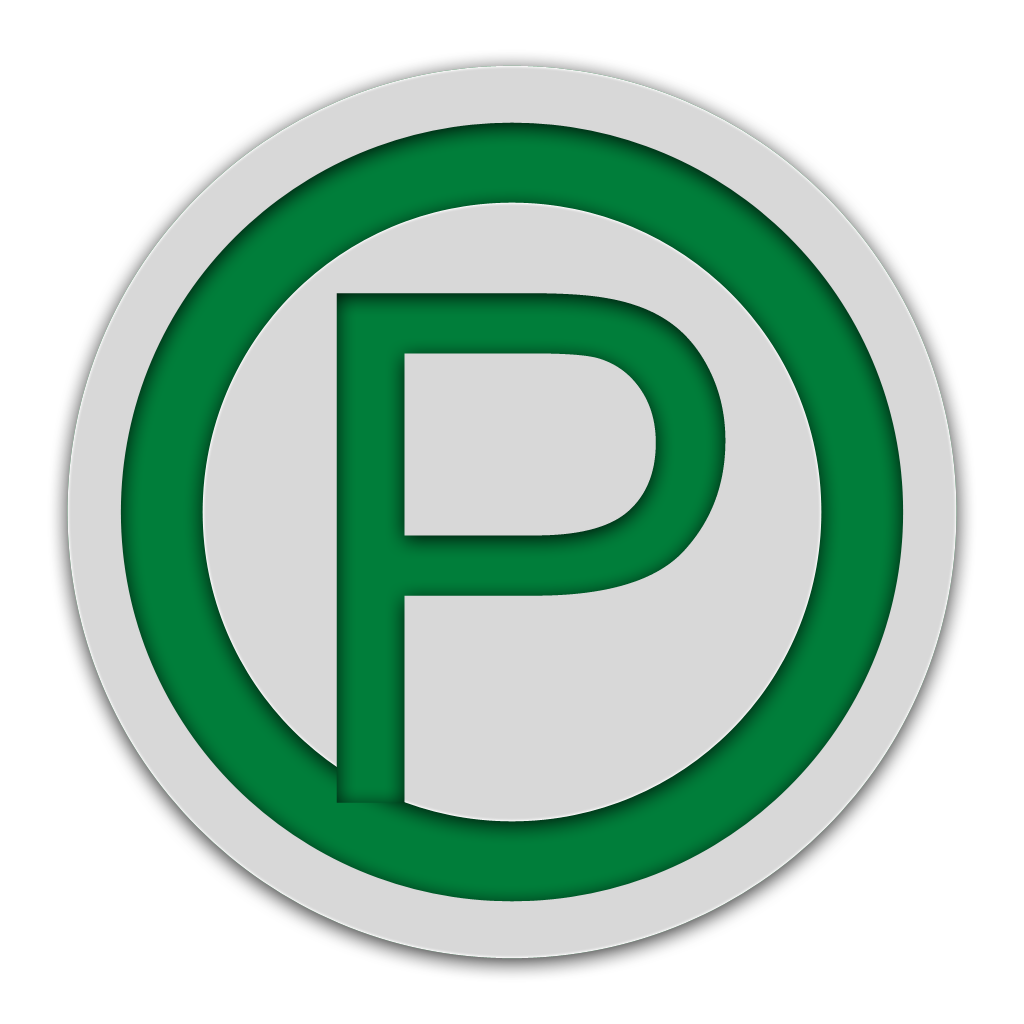
<style>
.page{position:relative;width:1024px;height:1024px;background:#ffffff}
.page>*{position:absolute;margin:0}
.t1{font:711.1px "ArialMT";color:#007b39}
</style>
<div class="page">
<p class="t1" style="left:336px;top:293px;width:390px;height:510px">P</p>
</div>
